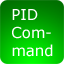
<style>
.page{position:relative;width:64px;height:64px}
.page>*{position:absolute;margin:0}
.t1{font:14.9px "Verdana";color:#ffffff}
</style>
<div class="page">
<p class="t1" style="left:12px;top:9px;width:41px;height:48px">PID<br>Com-<br>mand</p>
</div>
